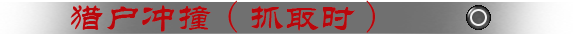
<style>
.page{position:relative;width:573px;height:34px;background:#707070}
.page>*{position:absolute;margin:0}
.t1{font:36px "STLiti";color:#ba060b}
.t2{font:36px "FangSong";color:#ba060b}
</style>
<div class="page">
<p class="t1" style="left:70px;top:0px;width:306px;height:33px">猎户冲撞<span class="t2">(</span>抓取时<span class="t2">)</span></p>
</div>
